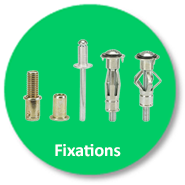
<style>
.page{position:relative;width:185px;height:185px;background:#00cc66}
.page>*{position:absolute;margin:0}
.t1{font:18px "Calibri-Bold";color:#ffffff}
</style>
<div class="page">
<p class="t1" style="left:55px;top:144px;width:66px;height:13px">Fixations</p>
</div>
